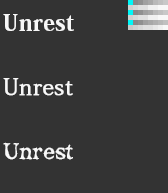
<style>
.page{position:relative;width:168px;height:193px;background:#333333}
.page>*{position:absolute;margin:0}
.t1{font:22px/64px "KozMinPro-Heavy";letter-spacing:0.022em;color:#f8f8f8}
.t2{font:22px/64px "AdobeFangsongStd-Regular";letter-spacing:0.028em;color:#f8f8f8;font-weight:bold}
.t3{font:22px/64px "ComicMysteryStd-DB";letter-spacing:-0.006em;color:#f8f8f8}
</style>
<div class="page">
<p class="t1" style="left:3px;top:14px;width:71px;height:146px">Unrest<br><span class="t2">Unrest<br></span><span class="t3">Unrest</span></p>
</div>
